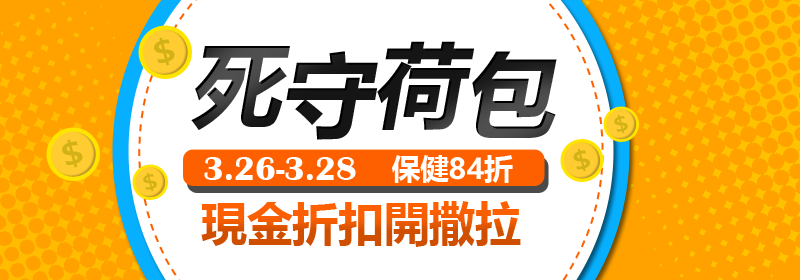
<style>
.page{position:relative;width:800px;height:280px;background:#ffffff}
.page>*{position:absolute;margin:0}
.t1{font:29.4px "MicrosoftYaHeiUI-Bold";color:#d3b217;scale:1.25 1}
.t2{font:91.6px "MicrosoftYaHeiUI-Bold";color:#151515;font-style:italic}
.t3{font:19.5px "MicrosoftYaHeiUI-Bold";color:#d3b217;scale:1.25 1}
.t4{font:23.6px "MicrosoftYaHeiUI-Bold";color:#d3b217;scale:1.25 1}
.t5{font:34.3px "BritannicBold";color:#ffffff}
.t6{font:28.6px "MicrosoftYaHeiUI-Bold";color:#ffffff}
.t7{font:45.6px "MicrosoftYaHeiUI-Bold"}
</style>
<div class="page">
<p class="t1" style="left:154px;top:37px;width:21px;height:29px;rotate:-15deg">$</p>
<p class="t2" style="left:191px;top:41px;width:366px;height:99px">死守荷包</p>
<p class="t3" style="left:614px;top:114px;width:14px;height:20px;rotate:-15deg">$</p>
<p class="t1" style="left:62px;top:139px;width:21px;height:29px;rotate:-15deg">$</p>
<p class="t4" style="left:573px;top:149px;width:17px;height:23px;rotate:-15deg">$</p>
<p class="t5" style="left:204px;top:157px;width:152px;height:23px">3.26-3.28</p>
<p class="t6" style="left:392px;top:155px;width:121px;height:28px">保健84折</p>
<p class="t3" style="left:143px;top:172px;width:14px;height:20px;rotate:-15deg">$</p>
<p class="t7" style="left:201px;top:201px;width:320px;height:46px">現金折扣開撒拉</p>
</div>
